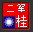
<style>
.page{position:relative;width:33px;height:32px;background:#f20000}
.page>*{position:absolute;margin:0}
.t1{font:10.4px "SimSun";color:#ffffff}
.t2{font:11.7px "SimSun";color:#ffffff}
</style>
<div class="page">
<p class="t1" style="left:7px;top:4px;width:18px;height:8px">二军</p>
<p class="t2" style="left:16px;top:15px;width:11px;height:12px">桂</p>
</div>
